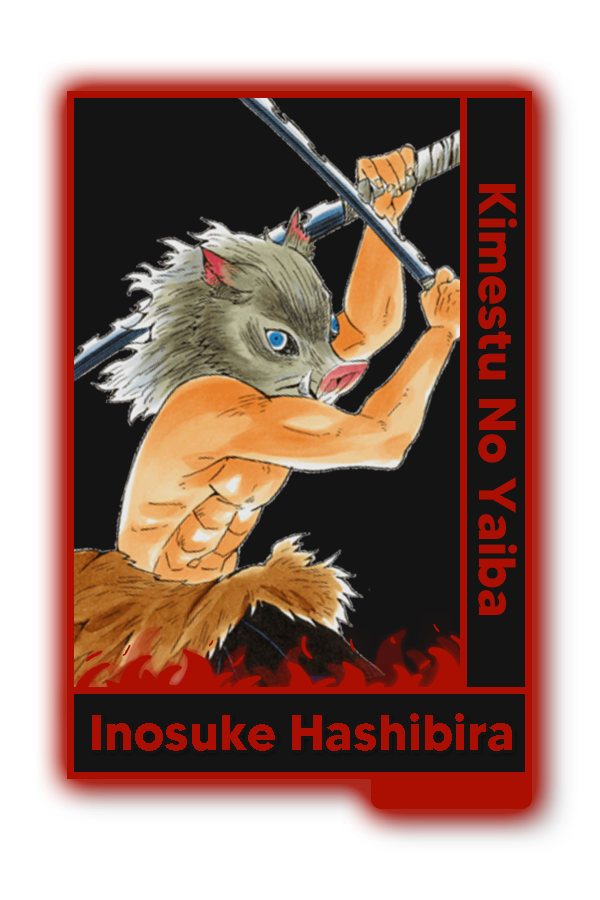
<style>
.page{position:relative;width:600px;height:900px;background:#141414}
.page>*{position:absolute;margin:0}
.t1{font:52px "MADETOMMY-Bold";color:#ab0f01}
.t2{font:50.5px "MADETOMMY-Bold";color:#ab0f01}
</style>
<div class="page">
<p class="t1" style="left:478px;top:184px;width:40px;height:431px;rotate:90deg">Kimestu No Yaiba</p>
<p class="t2" style="left:92px;top:713px;width:420px;height:38px">Inosuke Hashibira</p>
</div>
